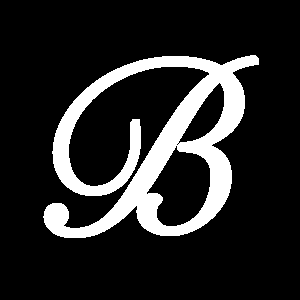
<style>
.page{position:relative;width:300px;height:300px;background:#000000}
.page>*{position:absolute;margin:0}
.t1{font:240px "SnellRoundhand";color:#ffffff;font-weight:bold}
</style>
<div class="page">
<p class="t1" style="left:43px;top:55px;width:216px;height:183px">B</p>
</div>
